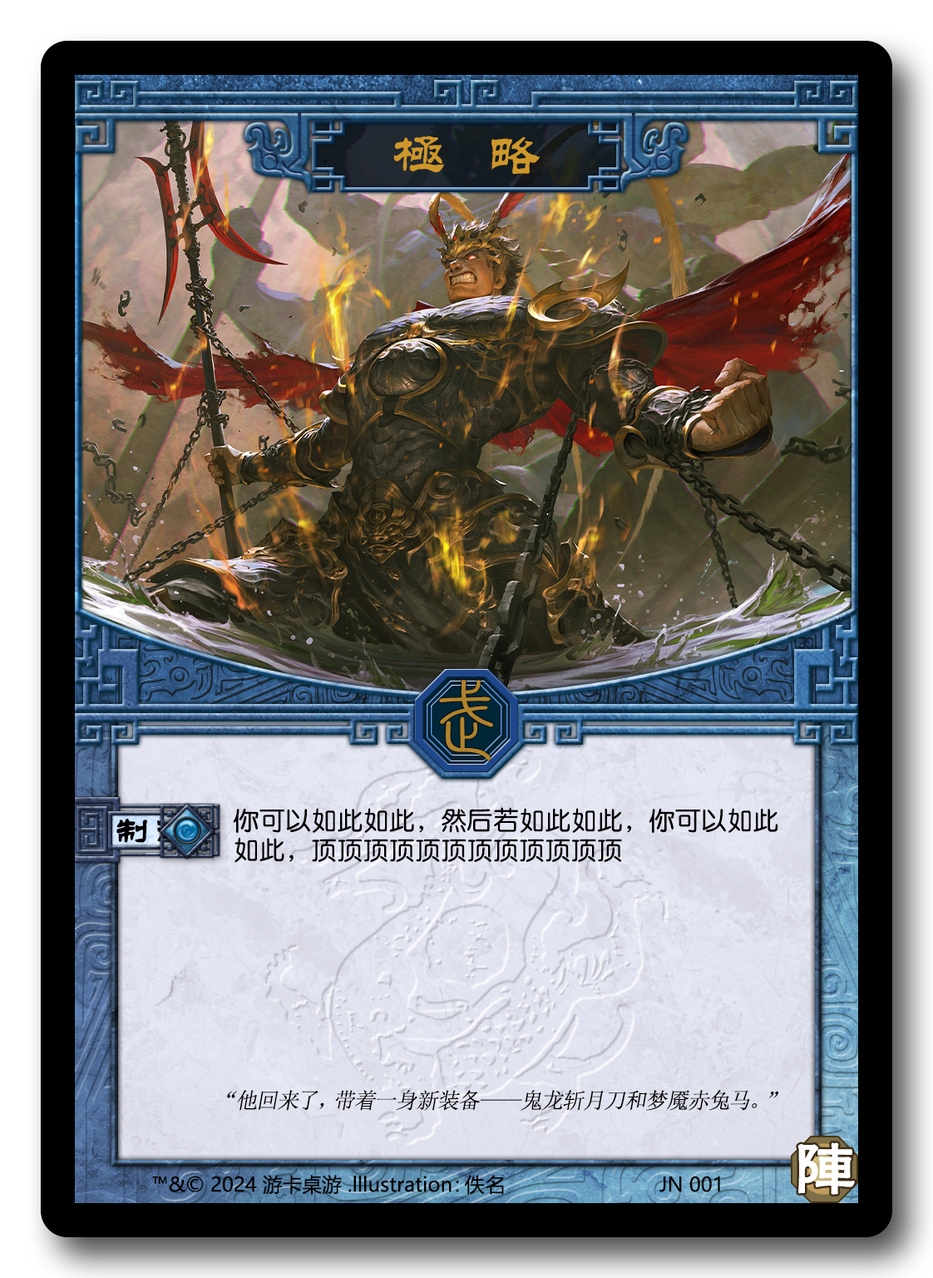
<style>
.page{position:relative;width:933px;height:1278px}
.page>*{position:absolute;margin:0}
.t1{font:55.5px "FZL2FW--GB1-0";letter-spacing:0.7em;color:#ce972a}
.t2{font:87.1px "FZuanSu";color:#b0832e;scale:1.2 1}
.t3{font:26px/29.5px "HYe3gj";color:#0b0306}
.t4{font:34.7px "FZL2FW--GB1-0";letter-spacing:0.15em;font-weight:bold}
.t5{font:21.8px "SimSun";letter-spacing:-0.025em;color:#000000;font-style:italic}
.t6{font:65.3px "FZHLFW--GB1-0";color:#ffffff}
.t7{font:19.8px "MicrosoftYaHei";color:#000000}
.t8{font:19.8px "MicrosoftYaHei";letter-spacing:0.08em;color:#000000}
</style>
<div class="page">
<p class="t1" style="left:393px;top:136px;width:147px;height:38px">极略</p>
<p class="t2" style="left:439px;top:680px;width:54px;height:80px">武</p>
<p class="t3" style="left:233px;top:807px;width:546px;height:56px">你可以如此如此，然后若如此如此，你可以如此<br>如此，顶顶顶顶顶顶顶顶顶顶顶顶</p>
<p class="t4" style="left:116px;top:819px;width:74px;height:24px">制衡</p>
<p class="t5" style="left:227px;top:1089px;width:552px;height:21px">“他回来了，带着一身新装备——鬼龙斩月刀和梦魇赤兔马。”</p>
<p class="t6" style="left:798px;top:1142px;width:57px;height:52px">阵</p>
<p class="t6" style="left:798px;top:1142px;width:57px;height:52px">阵</p>
<p class="t7" style="left:152px;top:1175px;width:307px;height:19px">™&amp;© 2024 游卡桌游 .lllustration：</p>
<p class="t8" style="left:464px;top:1175px;width:40px;height:19px">佚名</p>
<p class="t7" style="left:660px;top:1175px;width:60px;height:17px">JN 001</p>
</div>
